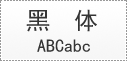
<style>
.page{position:relative;width:127px;height:61px}
.page>*{position:absolute;margin:0}
.t1{font:24px "SimHei";color:#343434}
.t2{font:18px "SimHei";color:#343434}
</style>
<div class="page">
<p class="t1" style="left:26px;top:9px;width:71px;height:23px">黑  体</p>
<p class="t2" style="left:37px;top:39px;width:53px;height:13px">ABCabc</p>
</div>
